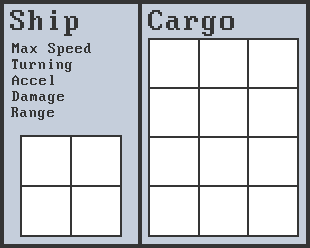
<style>
.page{position:relative;width:310px;height:248px;background:#ffffff}
.page>*{position:absolute;margin:0}
.t1{font:32px "PerfectDOSVGA437Win";color:#353535}
.t2{font:16px "PerfectDOSVGA437Win";color:#353535}
</style>
<div class="page">
<p class="t1" style="left:10px;top:10px;width:68px;height:26px">Ship</p>
<p class="t1" style="left:148px;top:10px;width:86px;height:26px">Cargo</p>
<p class="t2" style="left:12px;top:43px;width:79px;height:13px">Max Speed</p>
<p class="t2" style="left:12px;top:59px;width:60px;height:13px">Turning</p>
<p class="t2" style="left:12px;top:75px;width:42px;height:10px">Accel</p>
<p class="t2" style="left:12px;top:91px;width:52px;height:13px">Damage</p>
<p class="t2" style="left:11px;top:107px;width:43px;height:13px">Range</p>
</div>
